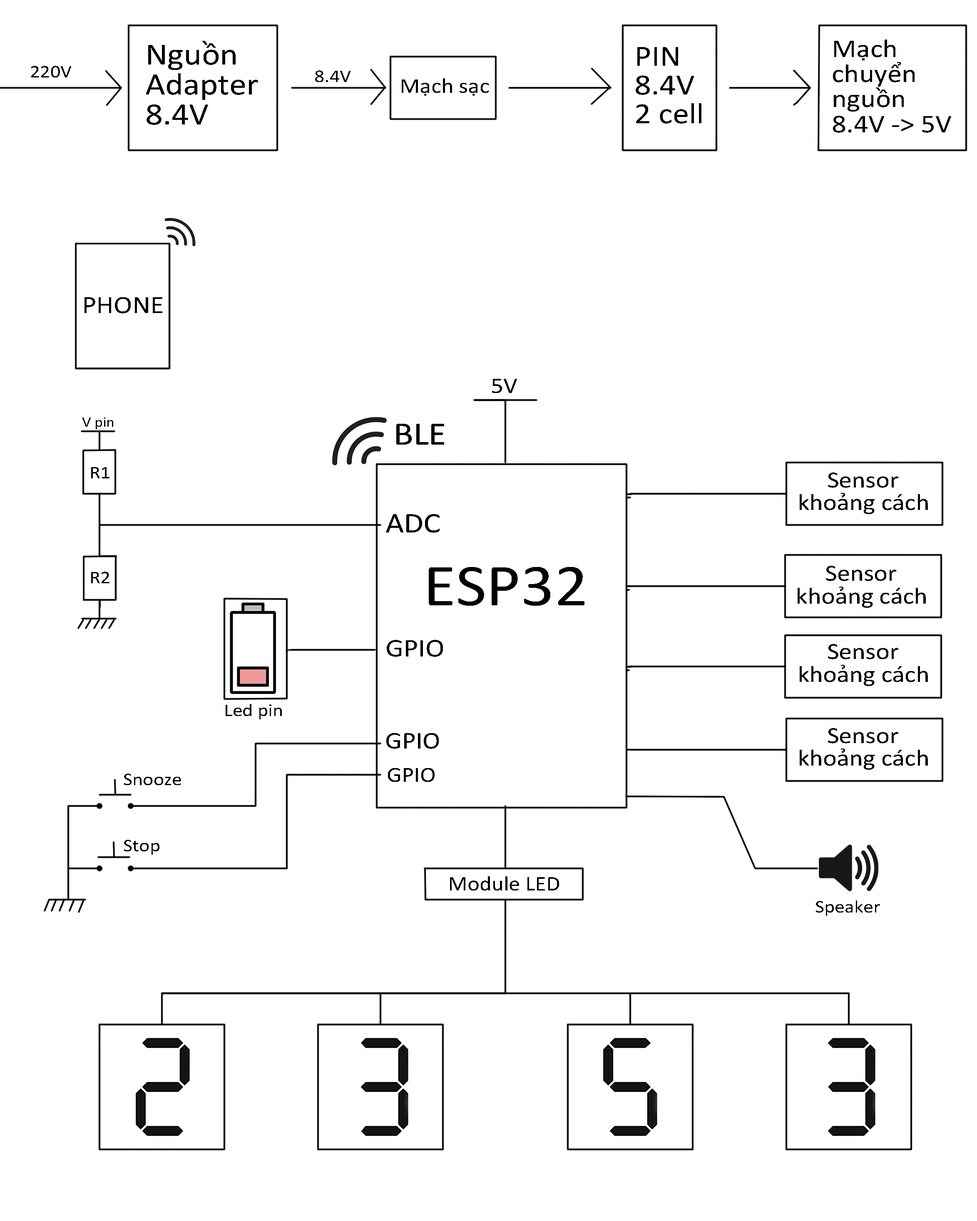
<style>
.page{position:relative;width:977px;height:1221px;background:#ffffff}
.page>*{position:absolute;margin:0}
.t1{font:31.1px/30px "Calibri";color:#000000;scale:1.11 1}
.t2{font:26px/25.1px "Calibri";color:#000000;scale:1.11 1}
.t3{font:29.7px/28.7px "Calibri";color:#000000;scale:1.11 1}
.t4{font:18px "Calibri";color:#000000;scale:1.11 1}
.t5{font:21.3px "Calibri";color:#000000;scale:1.11 1}
.t6{font:25.2px "Calibri";color:#000000;scale:1.11 1}
.t7{font:22.5px "Calibri";color:#000000;scale:1.11 1}
.t8{font:14.2px "Calibri";color:#000000;scale:1.11 1}
.t9{font:32.8px "Calibri";color:#000000;scale:1.11 1}
.t10{font:23.4px/22.7px "Calibri";color:#000000;scale:1.11 1}
.t11{font:28.7px "Calibri";color:#000000;scale:1.11 1}
.t12{font:59.8px "Calibri";color:#000000;scale:1.11 1}
.t13{font:25.7px "Calibri";color:#000000;scale:1.11 1}
.t14{font:24.1px "Calibri";color:#000000;scale:1.11 1}
.t15{font:21.4px "Calibri";color:#000000;scale:1.11 1}
.t16{font:20.6px "Calibri";color:#000000;scale:1.11 1}
</style>
<div class="page">
<p class="t1" style="left:146px;top:41px;width:112px;height:84px">Nguồn <br>Adapter<br>8.4V</p>
<p class="t2" style="left:833px;top:40px;width:118px;height:93px">Mạch <br>chuyển <br>nguồn<br>8.4V -&gt; 5V</p>
<p class="t3" style="left:636px;top:47px;width:65px;height:77px">PIN <br>8.4V<br>2 cell</p>
<p class="t4" style="left:31px;top:66px;width:40px;height:11px">220V</p>
<p class="t4" style="left:315px;top:70px;width:35px;height:12px">8.4V</p>
<p class="t5" style="left:402px;top:78px;width:87px;height:18px">Mạch sạc</p>
<p class="t6" style="left:84px;top:297px;width:78px;height:16px">PHONE</p>
<p class="t7" style="left:492px;top:379px;width:25px;height:14px">5V</p>
<p class="t8" style="left:82px;top:417px;width:31px;height:12px">V pin</p>
<p class="t9" style="left:396px;top:424px;width:48px;height:21px">BLE</p>
<p class="t4" style="left:91px;top:467px;width:18px;height:11px">R1</p>
<p class="t10" style="left:800px;top:472px;width:128px;height:42px">Sensor<br>khoảng cách</p>
<p class="t11" style="left:386px;top:514px;width:54px;height:19px">ADC</p>
<p class="t12" style="left:429px;top:567px;width:155px;height:39px">ESP32</p>
<p class="t10" style="left:797px;top:566px;width:129px;height:42px">Sensor<br>khoảng cách</p>
<p class="t4" style="left:91px;top:571px;width:18px;height:12px">R2</p>
<p class="t13" style="left:387px;top:640px;width:56px;height:17px">GPIO</p>
<p class="t10" style="left:800px;top:644px;width:128px;height:42px">Sensor<br>khoảng cách</p>
<p class="t4" style="left:226px;top:704px;width:56px;height:15px">Led pin</p>
<p class="t14" style="left:386px;top:733px;width:53px;height:16px">GPIO</p>
<p class="t10" style="left:800px;top:728px;width:128px;height:42px">Sensor<br>khoảng cách</p>
<p class="t4" style="left:124px;top:773px;width:57px;height:12px">Snooze</p>
<p class="t15" style="left:388px;top:768px;width:47px;height:14px">GPIO</p>
<p class="t4" style="left:124px;top:839px;width:35px;height:15px">Stop</p>
<p class="t16" style="left:450px;top:876px;width:109px;height:14px">Module LED</p>
<p class="t4" style="left:816px;top:900px;width:64px;height:16px">Speaker</p>
</div>
